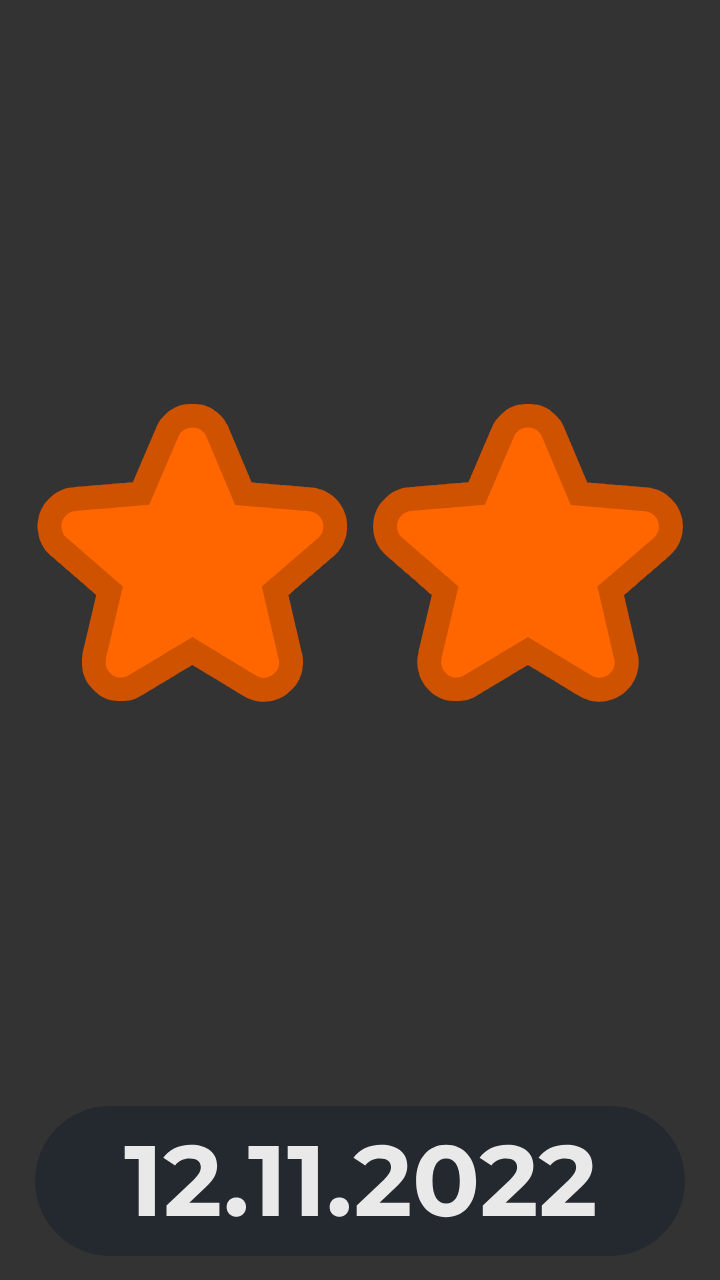
<style>
.page{position:relative;width:720px;height:1280px;background:#333333}
.page>*{position:absolute;margin:0}
.t1{font:100px "Montserrat-Bold";color:#e9e9e9}
</style>
<div class="page">
<p class="t1" style="left:124px;top:1144px;width:471px;height:74px">12.11.2022</p>
</div>
